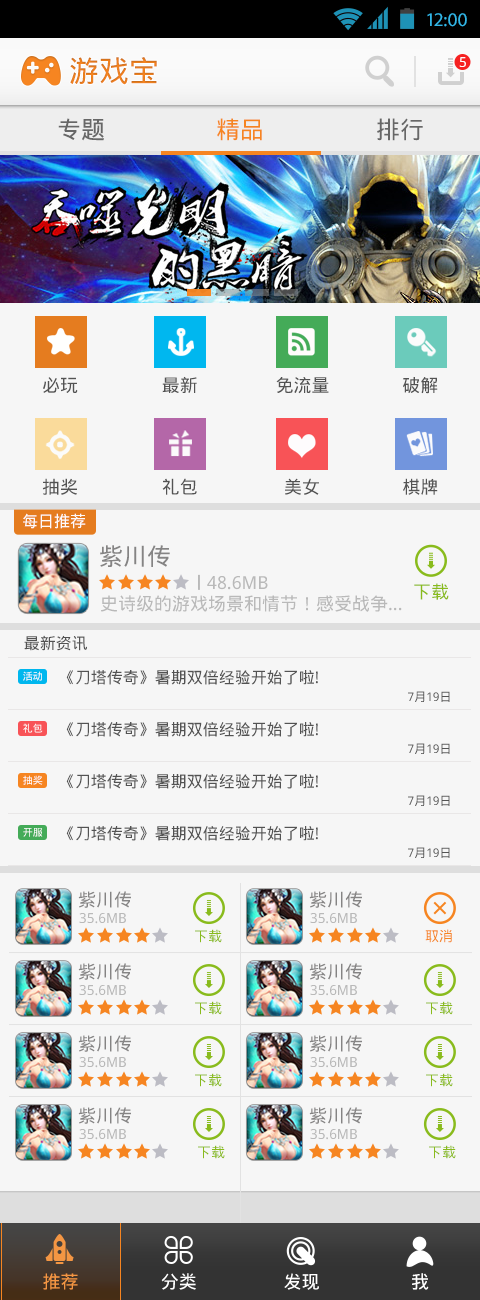
<style>
.page{position:relative;width:480px;height:1300px;background:#f6f6f6}
.page>*{position:absolute;margin:0}
.t1{font:19.4px "MyriadPro-Regular";color:#33b5e5}
.t2{font:30px "DroidSansFallback";color:#f68521}
.t3{font:14px "DroidSansFallback";color:#fefefe}
.t4{font:24px "DroidSansFallback";color:#676767}
.t5{font:24px "DroidSansFallback";color:#f68521}
.t6{font:18px "DroidSansFallback";color:#535353}
.t7{font:16.1px "DroidSansFallback";color:#fefafa}
.t8{font:24.1px "DroidSansFallback";color:#858484}
.t9{font:18.1px "DroidSansFallback";color:#b9b9b9}
.t10{font:18.1px "DroidSansFallback";color:#89bb1c}
.t11{font:16px "DroidSansFallback";color:#535353}
.t12{font:10px "DroidSansFallback"}
.t13{font:12px "DroidSansFallback";color:#535353}
.t14{font:10px "DroidSansFallback";color:#fefdfd}
.t15{font:18px "DroidSansFallback";color:#858484}
.t16{font:14px "DroidSansFallback";color:#b9b9b9}
.t17{font:14px "DroidSansFallback";color:#89bb1c}
.t18{font:14px "DroidSansFallback";color:#f68521}
.t19{font:18px "DroidSansFallback";color:#f49643}
.t20{font:18px "DroidSansFallback";color:#ffffff}
</style>
<div class="page">
<p class="t1" style="left:427px;top:13px;width:40px;height:14px">12:00</p>
<p class="t2" style="left:70px;top:57px;width:87px;height:28px">游戏宝</p>
<p class="t3" style="left:459px;top:57px;width:7px;height:10px">5</p>
<p class="t4" style="left:58px;top:118px;width:46px;height:23px">专题</p>
<p class="t5" style="left:217px;top:118px;width:45px;height:23px">精品</p>
<p class="t4" style="left:377px;top:118px;width:46px;height:23px">排行</p>
<p class="t6" style="left:43px;top:377px;width:35px;height:16px">必玩</p>
<p class="t6" style="left:162px;top:376px;width:35px;height:17px">最新</p>
<p class="t6" style="left:276px;top:377px;width:53px;height:17px">免流量</p>
<p class="t6" style="left:403px;top:377px;width:35px;height:17px">破解</p>
<p class="t6" style="left:42px;top:478px;width:35px;height:17px">抽奖</p>
<p class="t6" style="left:162px;top:478px;width:35px;height:17px">礼包</p>
<p class="t6" style="left:285px;top:478px;width:34px;height:17px">美女</p>
<p class="t6" style="left:403px;top:478px;width:35px;height:17px">棋牌</p>
<p class="t7" style="left:23px;top:513px;width:63px;height:16px">每日推荐</p>
<p class="t8" style="left:100px;top:545px;width:70px;height:22px">紫川传</p>
<p class="t9" style="left:207px;top:576px;width:61px;height:14px">48.6MB</p>
<p class="t10" style="left:414px;top:583px;width:35px;height:17px">下载</p>
<p class="t9" style="left:101px;top:595px;width:301px;height:17px">史诗级的游戏场景和情节！感受战争...</p>
<p class="t11" style="left:24px;top:635px;width:63px;height:16px">最新资讯</p>
<p class="t12" style="left:23px;top:671px;width:19px;height:10px">活动</p>
<p class="t11" style="left:66px;top:670px;width:252px;height:15px">《刀塔传奇》暑期双倍经验开始了啦!</p>
<p class="t13" style="left:408px;top:691px;width:42px;height:11px">7月19日</p>
<p class="t12" style="left:23px;top:723px;width:20px;height:10px">礼包</p>
<p class="t11" style="left:66px;top:722px;width:252px;height:15px">《刀塔传奇》暑期双倍经验开始了啦!</p>
<p class="t13" style="left:408px;top:743px;width:42px;height:11px">7月19日</p>
<p class="t11" style="left:66px;top:774px;width:252px;height:15px">《刀塔传奇》暑期双倍经验开始了啦!</p>
<p class="t14" style="left:23px;top:775px;width:20px;height:10px">抽奖</p>
<p class="t13" style="left:408px;top:795px;width:42px;height:11px">7月19日</p>
<p class="t14" style="left:23px;top:828px;width:20px;height:9px">开服</p>
<p class="t11" style="left:66px;top:826px;width:252px;height:15px">《刀塔传奇》暑期双倍经验开始了啦!</p>
<p class="t13" style="left:408px;top:847px;width:42px;height:11px">7月19日</p>
<p class="t15" style="left:78px;top:891px;width:53px;height:17px">紫川传</p>
<p class="t15" style="left:309px;top:891px;width:53px;height:17px">紫川传</p>
<p class="t16" style="left:79px;top:913px;width:47px;height:11px">35.6MB</p>
<p class="t16" style="left:310px;top:913px;width:47px;height:11px">35.6MB</p>
<p class="t17" style="left:195px;top:929px;width:27px;height:14px">下载</p>
<p class="t18" style="left:425px;top:929px;width:27px;height:14px">取消</p>
<p class="t15" style="left:78px;top:963px;width:53px;height:17px">紫川传</p>
<p class="t15" style="left:309px;top:963px;width:53px;height:17px">紫川传</p>
<p class="t16" style="left:79px;top:985px;width:47px;height:11px">35.6MB</p>
<p class="t16" style="left:310px;top:985px;width:47px;height:11px">35.6MB</p>
<p class="t17" style="left:195px;top:1001px;width:27px;height:14px">下载</p>
<p class="t17" style="left:426px;top:1001px;width:27px;height:14px">下载</p>
<p class="t15" style="left:78px;top:1035px;width:53px;height:17px">紫川传</p>
<p class="t15" style="left:309px;top:1035px;width:53px;height:17px">紫川传</p>
<p class="t16" style="left:79px;top:1057px;width:47px;height:11px">35.6MB</p>
<p class="t16" style="left:310px;top:1057px;width:47px;height:11px">35.6MB</p>
<p class="t17" style="left:195px;top:1073px;width:27px;height:14px">下载</p>
<p class="t17" style="left:426px;top:1073px;width:27px;height:14px">下载</p>
<p class="t15" style="left:78px;top:1107px;width:53px;height:17px">紫川传</p>
<p class="t15" style="left:309px;top:1107px;width:53px;height:17px">紫川传</p>
<p class="t16" style="left:79px;top:1129px;width:47px;height:11px">35.6MB</p>
<p class="t16" style="left:310px;top:1129px;width:47px;height:11px">35.6MB</p>
<p class="t17" style="left:198px;top:1145px;width:27px;height:14px">下载</p>
<p class="t17" style="left:429px;top:1145px;width:27px;height:14px">下载</p>
<p class="t19" style="left:43px;top:1273px;width:35px;height:17px">推荐</p>
<p class="t20" style="left:161px;top:1273px;width:35px;height:17px">分类</p>
<p class="t20" style="left:284px;top:1273px;width:35px;height:17px">发现</p>
<p class="t20" style="left:412px;top:1273px;width:17px;height:17px">我</p>
</div>
